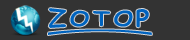
<style>
.page{position:relative;width:190px;height:40px;background:#333333}
.page>*{position:absolute;margin:0}
.t1{font:26px "ComicSansMS";letter-spacing:0.1em;color:#0063be;text-transform:uppercase;text-decoration:underline}
</style>
<div class="page">
<p class="t1" style="left:48px;top:8px;width:104px;height:27px">ZOTOP</p>
</div>
